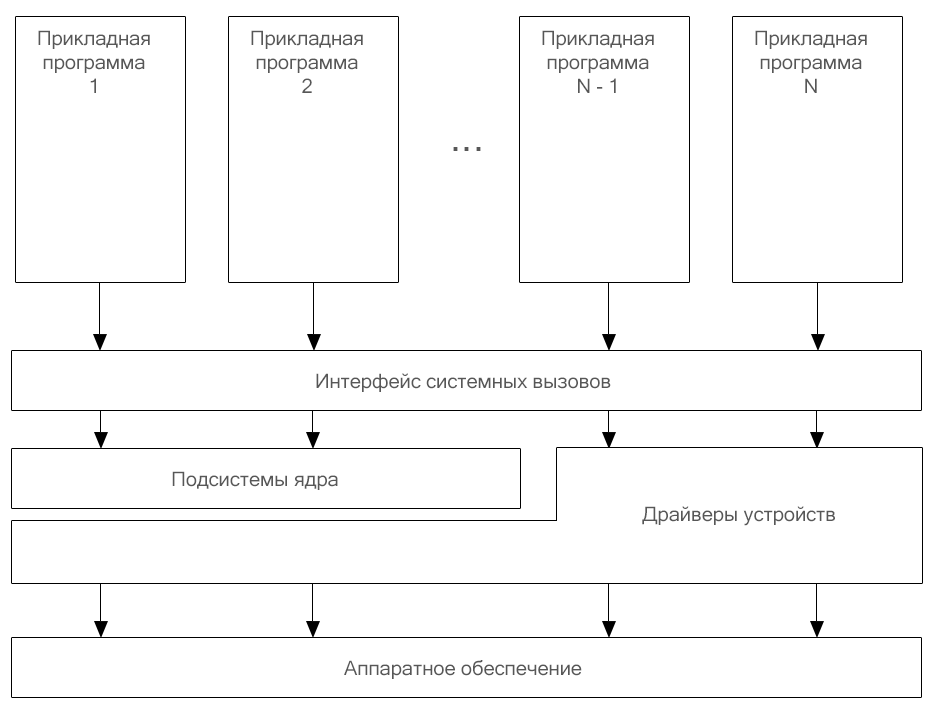
<style>
.page{position:relative;width:936px;height:714px;background:#ffffff}
.page>*{position:absolute;margin:0}
.t1{font:20px "MicrosoftSansSerif";color:#575757}
.t2{font:40px "MicrosoftSansSerif";color:#575757}
</style>
<div class="page">
<p class="t1" style="left:38px;top:30px;width:112px;height:63px;text-align:center">Прикладная<br>программа<br>1</p>
<p class="t1" style="left:251px;top:30px;width:112px;height:63px;text-align:center">Прикладная<br>программа<br>2</p>
<p class="t1" style="left:542px;top:30px;width:112px;height:63px;text-align:center">Прикладная<br>программа<br>N - 1</p>
<p class="t1" style="left:755px;top:30px;width:112px;height:63px;text-align:center">Прикладная<br>программа<br>N</p>
<p class="t2" style="left:453px;top:147px;width:28px;height:4px">...</p>
<p class="t1" style="left:316px;top:373px;width:295px;height:19px">Интерфейс системных вызовов</p>
<p class="t1" style="left:172px;top:471px;width:166px;height:19px">Подсистемы ядра</p>
<p class="t1" style="left:642px;top:506px;width:193px;height:20px">Драйверы устройств</p>
<p class="t1" style="left:344px;top:660px;width:238px;height:19px">Аппаратное обеспечение</p>
</div>
